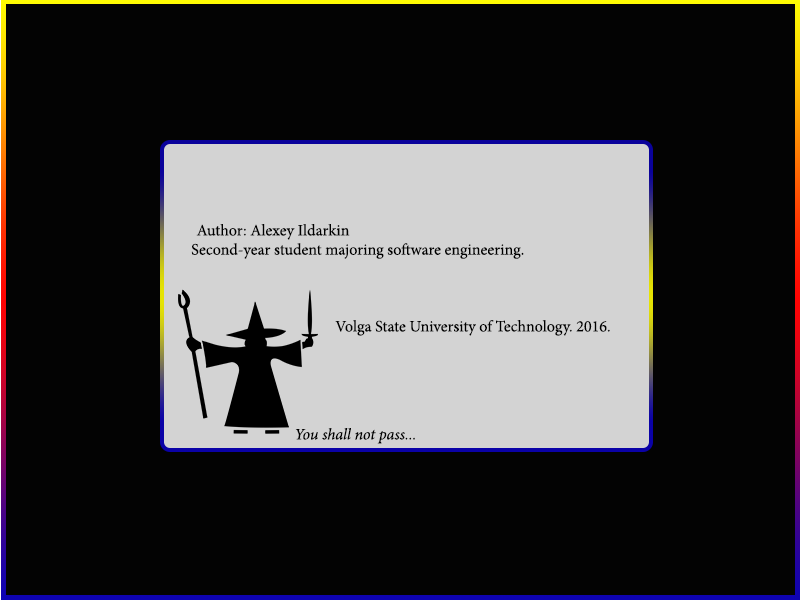
<style>
.page{position:relative;width:800px;height:600px;background:#030303}
.page>*{position:absolute;margin:0}
.t1{font:16px "MinionPro-Regular";color:#000000}
.t2{font:16px "MinionPro-It";color:#000000}
</style>
<div class="page">
<p class="t1" style="left:191px;top:224px;width:419px;height:112px">Author: Alexey Ildarkin<br>Second-year student majoring software engineering.<br><br><br><br>    Volga State University of Technology. 2016.</p>
<p class="t2" style="left:295px;top:428px;width:120px;height:16px">You shall not pass...</p>
</div>
